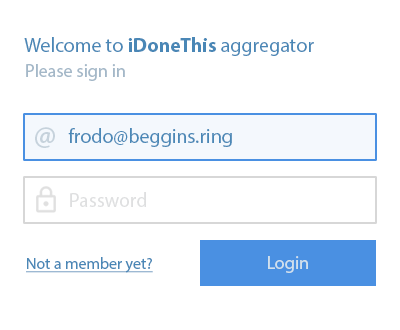
<style>
.page{position:relative;width:400px;height:330px;background:#ffffff}
.page>*{position:absolute;margin:0}
.t1{font:20px "MyriadPro-Regular";color:#4a87b6}
.t2{font:20px "MyriadPro-Bold";color:#4a87b6}
.t3{font:18px "MyriadPro-Regular";color:#a4b8c8}
.t4{font:30px "MyriadPro-Semibold";color:#c6d2dc}
.t5{font:20px "MyriadPro-Regular";color:#dddfe0}
.t6{font:16px "MyriadPro-Regular";color:#4a87b6;text-decoration:underline}
.t7{font:18px "MyriadPro-Regular";color:#d1e0ec}
</style>
<div class="page">
<p class="t1" style="left:24px;top:37px;width:290px;height:19px">Welcome to <span class="t2">iDoneThis</span> aggregator</p>
<p class="t3" style="left:26px;top:64px;width:99px;height:17px">Please sign in</p>
<p class="t4" style="left:35px;top:127px;width:20px;height:21px">@</p>
<p class="t1" style="left:68px;top:128px;width:164px;height:19px">frodo@beggins.ring</p>
<p class="t5" style="left:70px;top:192px;width:76px;height:15px">Password</p>
<p class="t6" style="left:26px;top:257px;width:127px;height:16px">Not a member yet?</p>
<p class="t7" style="left:268px;top:256px;width:40px;height:17px">Login</p>
</div>
